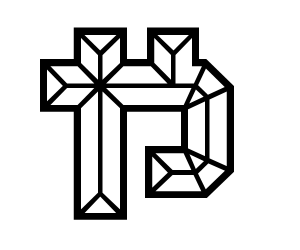
<style>
.page{position:relative;width:300px;height:250px;background:#ffffff}
.page>*{position:absolute;margin:0}
.t1{font:241.8px "TA-rb0925";letter-spacing:0.08em;color:#000000}
</style>
<div class="page">
<p class="t1" style="left:40px;top:27px;width:194px;height:193px">や</p>
</div>
